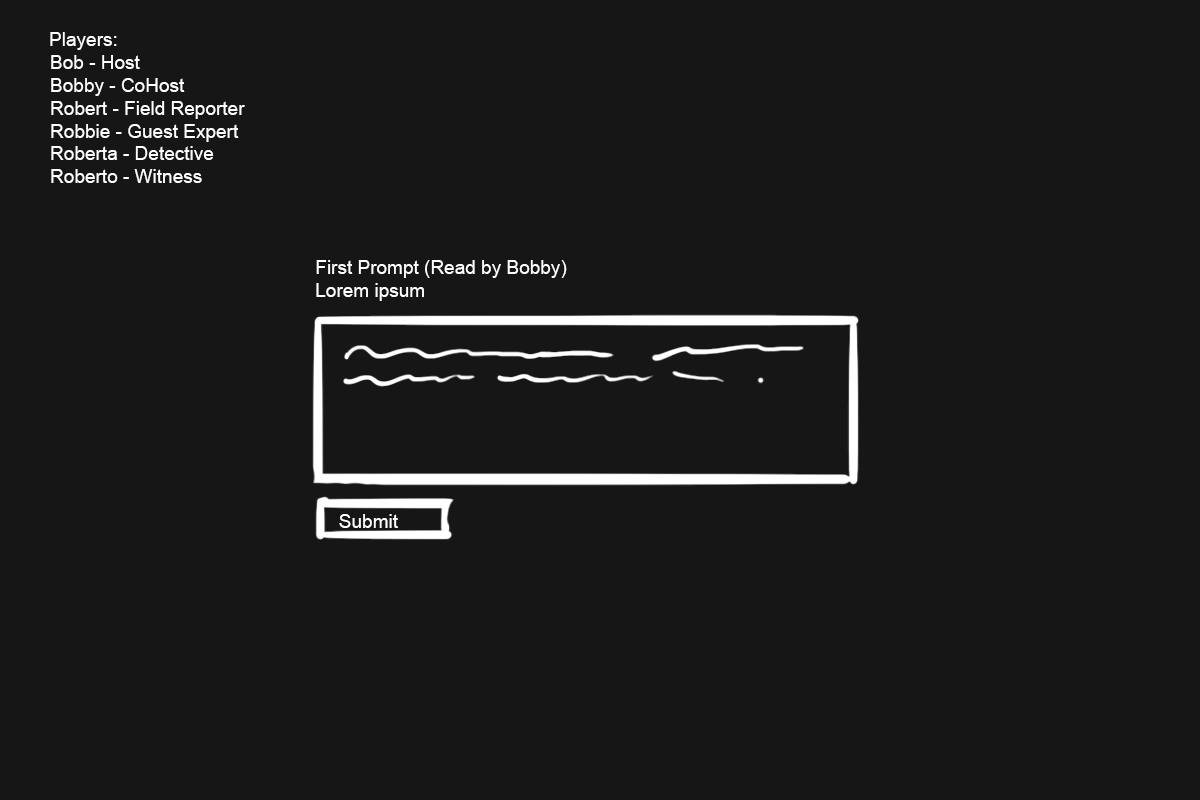
<style>
.page{position:relative;width:1200px;height:800px;background:#161616}
.page>*{position:absolute;margin:0}
.t1{font:19px "ArialMT";color:#ffffff}
</style>
<div class="page">
<p class="t1" style="left:50px;top:32px;width:195px;height:151px;text-align:center">Players: <br>Bob - Host<br>Bobby - CoHost<br>Robert - Field Reporter<br>Robbie - Guest Expert<br>Roberta - Detective<br>Roberto - Witness</p>
<p class="t1" style="left:316px;top:260px;width:251px;height:41px">First Prompt (Read by Bobby) <br>Lorem ipsum</p>
<p class="t1" style="left:339px;top:514px;width:59px;height:14px">Submit</p>
</div>
